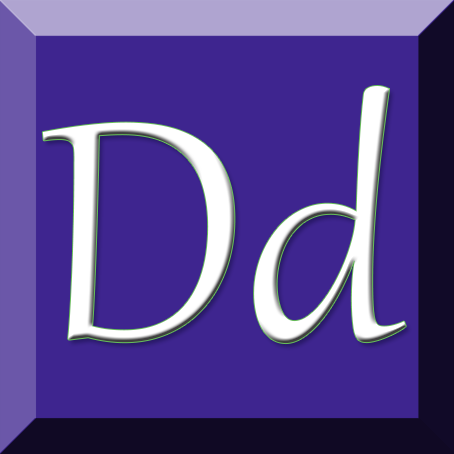
<style>
.page{position:relative;width:454px;height:454px;background:#3e258f}
.page>*{position:absolute;margin:0}
.t1{font:380px "Gabriola";color:#ffffff}
</style>
<div class="page">
<p class="t1" style="left:42px;top:86px;width:364px;height:258px">Dd</p>
</div>
